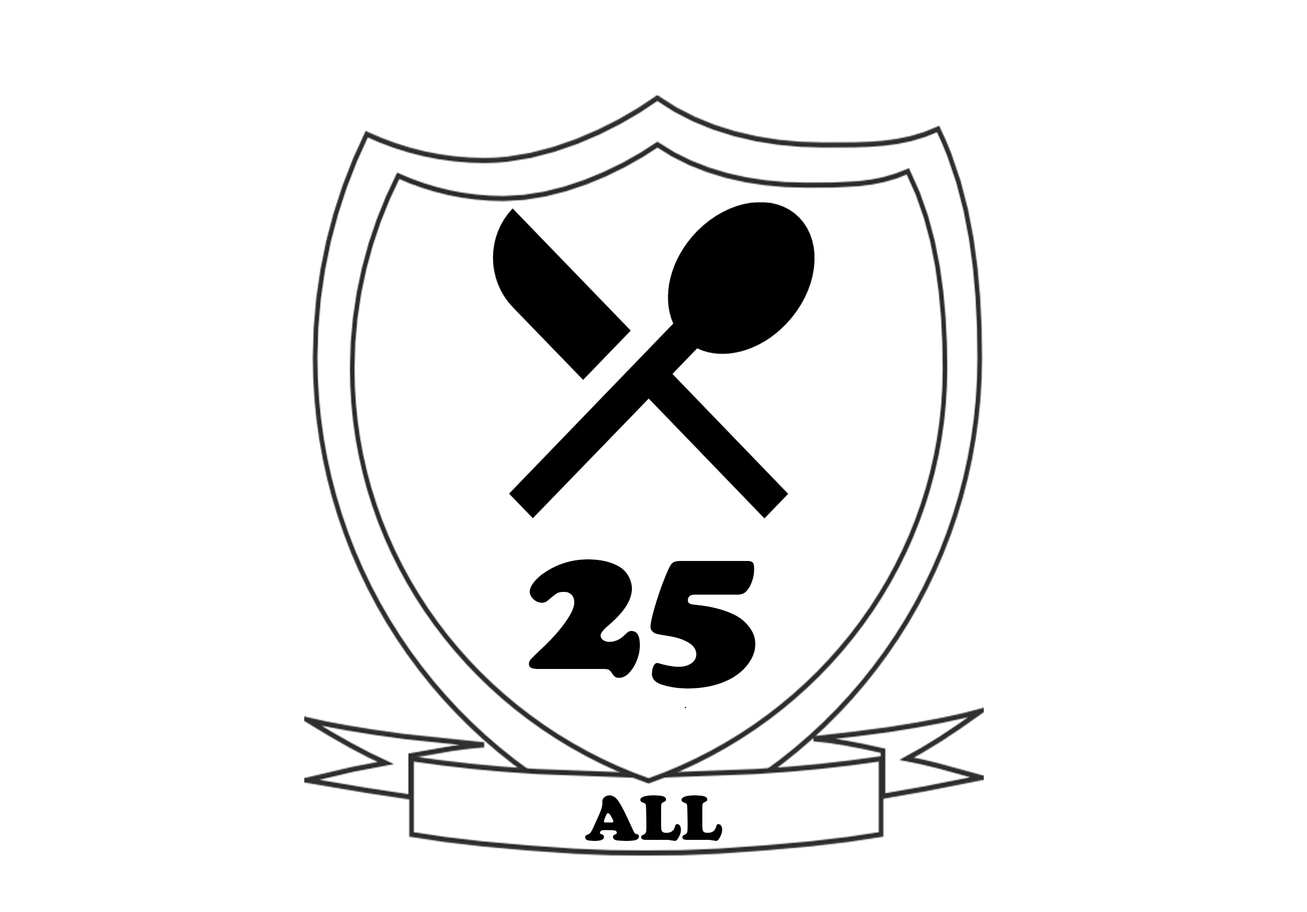
<style>
.page{position:relative;width:1307px;height:912px;background:#ffffff}
.page>*{position:absolute;margin:0}
.t1{font:195.3px "CooperBlack";color:#000000}
.t2{font:65.1px "CooperBlack";color:#000000}
</style>
<div class="page">
<p class="t1" style="left:529px;top:559px;width:227px;height:129px">25</p>
<p class="t2" style="left:585px;top:795px;width:138px;height:46px">ALL</p>
</div>
